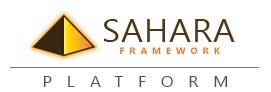
<style>
.page{position:relative;width:271px;height:92px;background:#ffffff}
.page>*{position:absolute;margin:0}
.t1{font:32px "SegoeUI";letter-spacing:0.04em;color:#533610;scale:1.05 1}
.t2{font:9px "SegoeUI-Bold";letter-spacing:0.52em;color:#df7d23;scale:1.05 1}
.t3{font:16px "SegoeUI";letter-spacing:0.88em;color:#4f4f4f;scale:1.05 1}
</style>
<div class="page">
<p class="t1" style="left:104px;top:19px;width:131px;height:23px">SAHARA</p>
<p class="t2" style="left:120px;top:47px;width:101px;height:8px">FRAMEWORK</p>
<p class="t3" style="left:43px;top:76px;width:185px;height:11px">PLATFORM</p>
</div>
